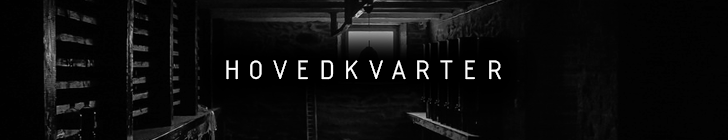
<style>
.page{position:relative;width:728px;height:140px;background:#030303}
.page>*{position:absolute;margin:0}
.t1{font:36px "AirbusMCDUb";letter-spacing:-0.02em;color:#ffffff}
</style>
<div class="page">
<p class="t1" style="left:226px;top:60px;width:275px;height:20px">HOVEDKVARTER</p>
</div>
